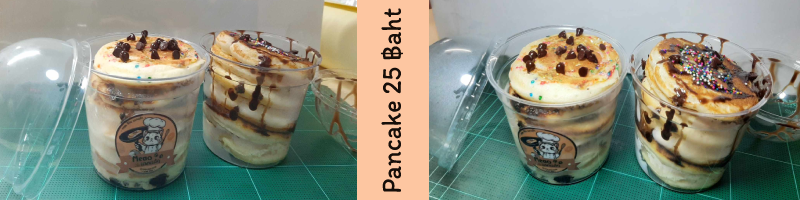
<style>
.page{position:relative;width:800px;height:200px}
.page>*{position:absolute;margin:0}
.t1{font:28.8px "Itim-Regular";color:#160e09;scale:0.91 1}
</style>
<div class="page">
<p class="t1" style="left:380px;top:8px;width:23px;height:184px;rotate:-90deg">Pancake 25 ฿aht</p>
</div>
